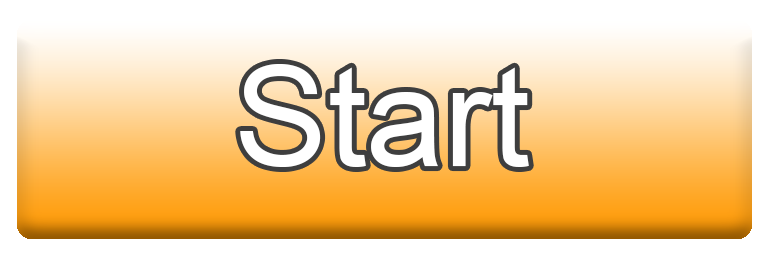
<style>
.page{position:relative;width:768px;height:256px;background:#ffffff}
.page>*{position:absolute;margin:0}
.t1{font:140px "ArialMT";color:#ffffff}
</style>
<div class="page">
<p class="t1" style="left:240px;top:64px;width:289px;height:103px">Start</p>
</div>
